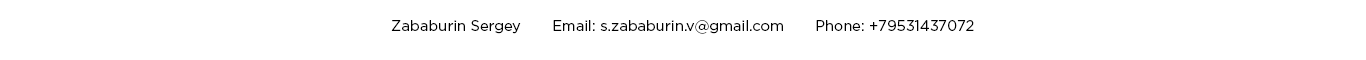
<style>
.page{position:relative;width:1366px;height:60px;background:#ffffff}
.page>*{position:absolute;margin:0}
.t1{font:14.6px "GothamPro";color:#000000}
</style>
<div class="page">
<p class="t1" style="left:391px;top:20px;width:583px;height:14px">Zababurin Sergey       Email: s.zababurin.v@gmail.com       Phone: +79531437072</p>
</div>
